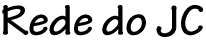
<style>
.page{position:relative;width:206px;height:40px;background:#ffffff}
.page>*{position:absolute;margin:0}
.t1{font:45px "TektonPro-Bold";color:#000000}
</style>
<div class="page">
<p class="t1" style="left:2px;top:5px;width:202px;height:32px">Rede do JC</p>
</div>
